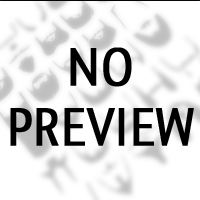
<style>
.page{position:relative;width:200px;height:200px;background:#ffffff}
.page>*{position:absolute;margin:0}
.t1{font:50px "GraublauWeb-Regular";color:#000000;font-weight:bold}
</style>
<div class="page">
<p class="t1" style="left:10px;top:46px;width:184px;height:99px;text-align:center">NO<br>PREVIEW</p>
</div>
